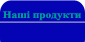
<style>
.page{position:relative;width:85px;height:42px;background:#0404b5}
.page>*{position:absolute;margin:0}
.t1{font:10px "TimesNewRomanPS-BoldMT";color:#009999;scale:1.13 1}
</style>
<div class="page">
<p class="t1" style="left:2px;top:11px;width:79px;height:10px">Наші продукти</p>
</div>
